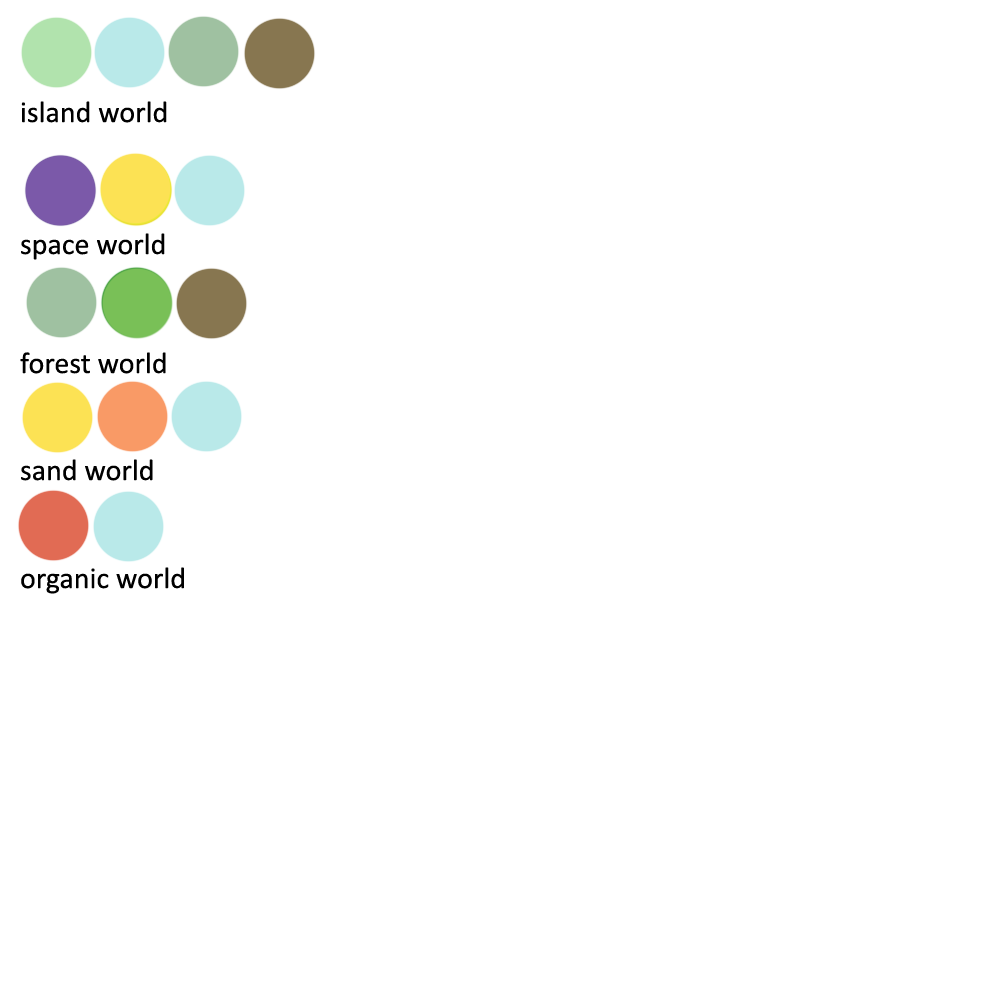
<style>
.page{position:relative;width:1000px;height:1000px;background:#ffffff}
.page>*{position:absolute;margin:0}
.t1{font:30px "Calibri";color:#000000}
</style>
<div class="page">
<p class="t1" style="left:21px;top:101px;width:146px;height:22px">island world</p>
<p class="t1" style="left:21px;top:233px;width:144px;height:27px">space world</p>
<p class="t1" style="left:20px;top:352px;width:146px;height:22px">forest world</p>
<p class="t1" style="left:21px;top:459px;width:132px;height:22px">sand world</p>
<p class="t1" style="left:21px;top:567px;width:163px;height:27px">organic world</p>
</div>
